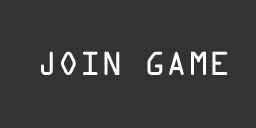
<style>
.page{position:relative;width:256px;height:128px;background:#333333}
.page>*{position:absolute;margin:0}
.t1{font:30px "OCRAStd";color:#ffffff}
</style>
<div class="page">
<p class="t1" style="left:41px;top:51px;width:187px;height:24px">JOIN GAME</p>
</div>
